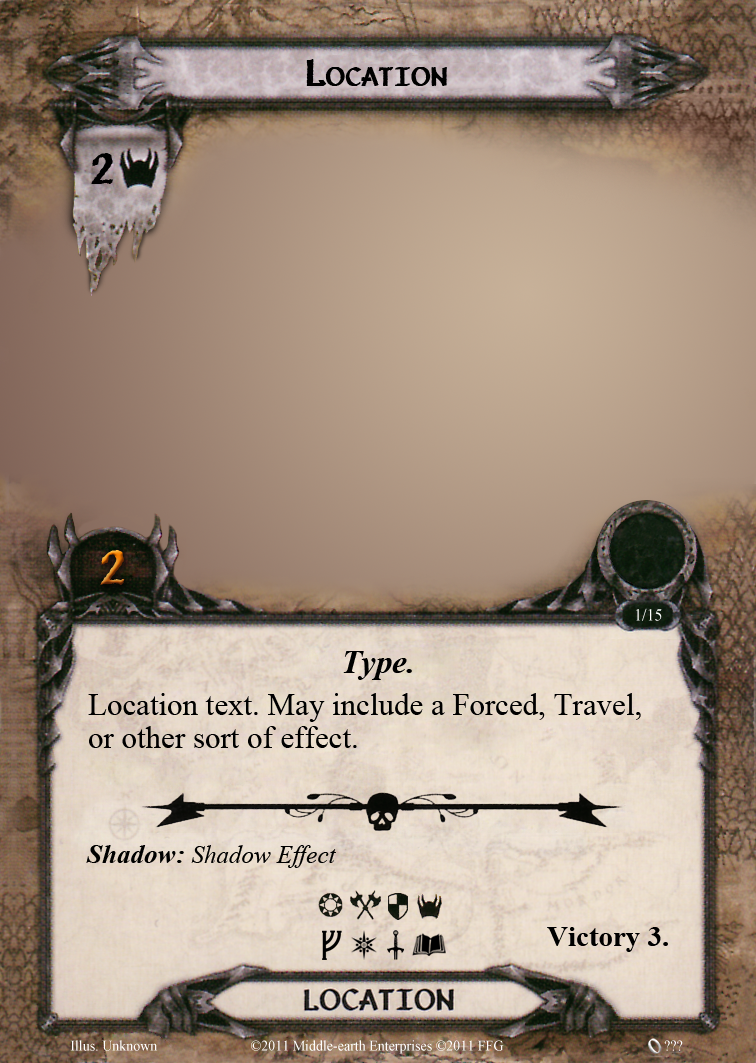
<style>
.page{position:relative;width:756px;height:1063px}
.page>*{position:absolute;margin:0}
.t1{font:37.5px "Vafthrudnir";letter-spacing:-0.002em;color:#000000;font-variant:small-caps}
.t2{font:41.7px "Vafthrudnir";color:#000000;font-variant:small-caps}
.t3{font:45.8px "Vafthrudnir";font-variant:small-caps}
.t4{font:16.7px "TimesNewRomanPSMT";color:#ffffff;scale:0.96 1}
.t5{font:33.3px "TimesNewRomanPS-BoldItalicMT";color:#000000}
.t6{font:31.2px/33.3px "TimesNewRomanPSMT";color:#000000}
.t7{font:25px "TimesNewRomanPS-ItalicMT";color:#000000}
.t8{font:27.1px "TimesNewRomanPS-BoldItalicMT";color:#000000}
.t9{font:29.2px "TimesNewRomanPS-BoldMT";color:#000000}
.t10{font:14.6px "TimesNewRomanPSMT";color:#ffffff;scale:0.96 1}
</style>
<div class="page">
<p class="t1" style="left:306px;top:59px;width:141px;height:27px">Location</p>
<p class="t2" style="left:91px;top:153px;width:22px;height:31px">2</p>
<p class="t3" style="left:100px;top:550px;width:25px;height:35px">2</p>
<p class="t4" style="left:636px;top:608px;width:26px;height:13px">1/15</p>
<p class="t5" style="left:343px;top:651px;width:69px;height:29px">Type.</p>
<p class="t6" style="left:88px;top:693px;width:553px;height:55px">Location text. May include a Forced, Travel,<br>or other sort of effect.</p>
<p class="t7" style="left:86px;top:845px;width:250px;height:23px"><span class="t8">Shadow: </span>Shadow Effect</p>
<p class="t9" style="left:547px;top:927px;width:121px;height:25px">Victory 3.</p>
<p class="t10" style="left:70px;top:1040px;width:88px;height:11px">Illus. Unknown</p>
<p class="t10" style="left:251px;top:1040px;width:253px;height:14px">©2011 Middle-earth Enterprises ©2011 FFG</p>
<p class="t10" style="left:664px;top:1040px;width:19px;height:11px">???</p>
</div>
